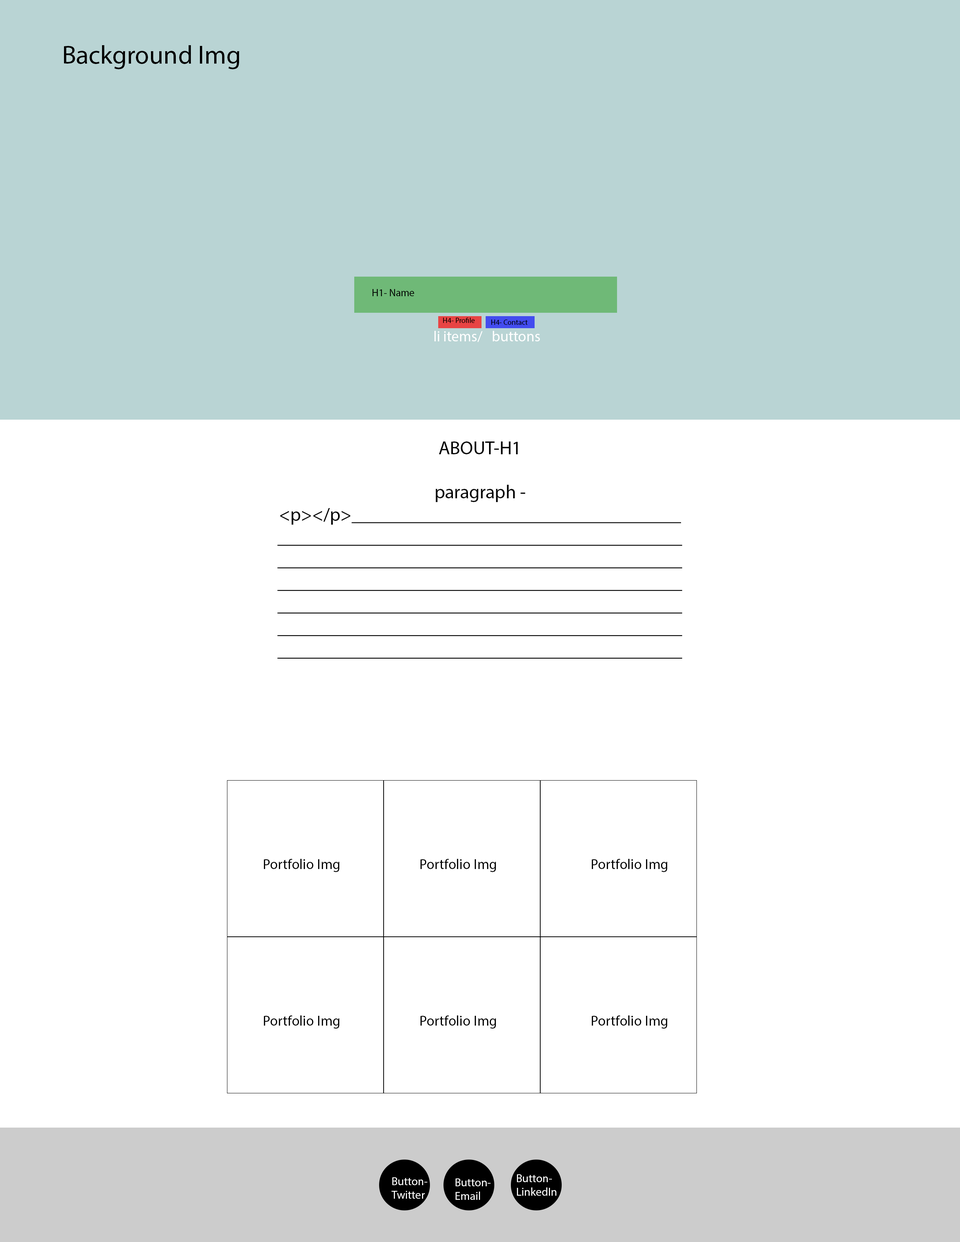
<style>
.page{position:relative;width:960px;height:1242px;background:#ffffff}
.page>*{position:absolute;margin:0}
.t1{font:26px "MyriadPro-Regular";color:#000000}
.t2{font:10.3px "MyriadPro-Regular";color:#000000}
.t3{font:7.4px "MyriadPro-Regular";color:#000000}
.t4{font:14.9px "MyriadPro-Regular";color:#ffffff}
.t5{font:18.8px "MyriadPro-Regular";color:#000000}
.t6{font:14.3px "MyriadPro-Regular";color:#000000}
.t7{font:11.4px "MyriadPro-Regular";color:#ffffff}
</style>
<div class="page">
<p class="t1" style="left:64px;top:45px;width:175px;height:24px">Background Img</p>
<p class="t2" style="left:372px;top:289px;width:42px;height:7px">H1- Name</p>
<p class="t3" style="left:443px;top:318px;width:32px;height:5px">H4- Profile</p>
<p class="t3" style="left:491px;top:320px;width:37px;height:5px">H4- Contact</p>
<p class="t4" style="left:434px;top:331px;width:106px;height:11px">li items/   buttons</p>
<p class="t5" style="left:439px;top:442px;width:79px;height:12px">ABOUT-H1</p>
<p class="t5" style="left:277px;top:485px;width:405px;height:174px;text-align:center">paragraph - &lt;p&gt;&lt;/p&gt;_____________________________________________________________________________________________________________________________________________________________________________________________________________________________________________________________________________________________________</p>
<p class="t6" style="left:264px;top:859px;width:76px;height:13px">Portfolio Img</p>
<p class="t6" style="left:420px;top:859px;width:76px;height:13px">Portfolio Img</p>
<p class="t6" style="left:592px;top:859px;width:75px;height:13px">Portfolio Img</p>
<p class="t6" style="left:264px;top:1016px;width:76px;height:13px">Portfolio Img</p>
<p class="t6" style="left:420px;top:1016px;width:76px;height:13px">Portfolio Img</p>
<p class="t6" style="left:592px;top:1016px;width:75px;height:13px">Portfolio Img</p>
<p class="t7" style="left:391px;top:1177px;width:36px;height:22px">Button-<br>Twitter</p>
<p class="t7" style="left:455px;top:1179px;width:35px;height:21px">Button- Email</p>
<p class="t7" style="left:517px;top:1174px;width:39px;height:22px">Button- LinkedIn</p>
</div>
